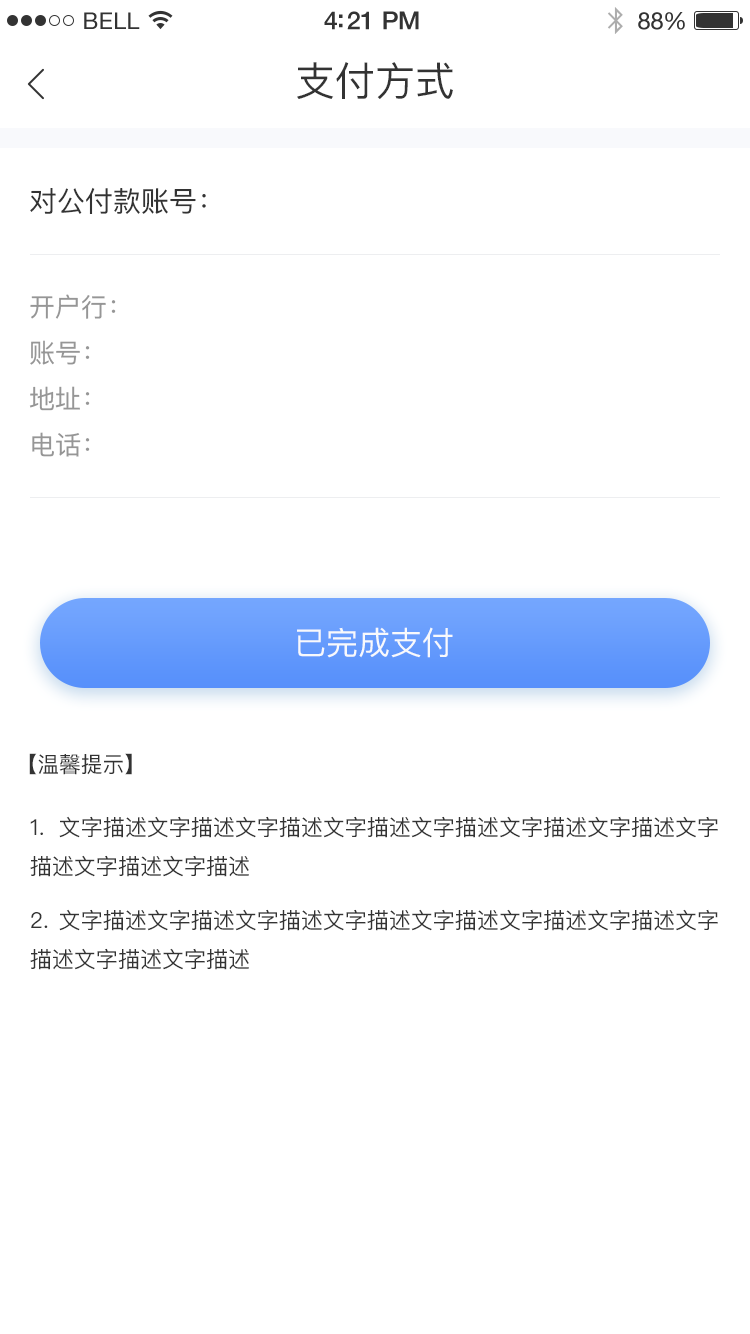
<style>
.page{position:relative;width:750px;height:1334px;background:#ffffff}
.page>*{position:absolute;margin:0}
.t1{font:23px "HelveticaNeue";letter-spacing:0.02em;color:#333333}
.t2{font:25px "HelveticaNeue-Medium";letter-spacing:-0.02em;color:#333333}
.t3{font:24px "HelveticaNeue";letter-spacing:-0.02em;color:#333333}
.t4{font:40px "PingFangSC-Regular";color:#333333}
.t5{font:27.9px "PingFangSC-Regular";color:#333333}
.t6{font:26px/36px "PingFangSC-Regular";color:#969696}
.t7{font:32px "PingFangSC-Regular";color:#f8f9fc}
.t8{font:22px "PingFangSC-Regular";color:#333333;text-transform:uppercase}
.t9{font:22px/39px "PingFangSC-Regular";color:#333333;text-transform:uppercase}
</style>
<div class="page">
<p class="t1" style="left:84px;top:12px;width:56px;height:17px">BELL</p>
<p class="t2" style="left:324px;top:11px;width:95px;height:19px">4:21 PM</p>
<p class="t3" style="left:638px;top:12px;width:47px;height:18px">88%</p>
<p class="t4" style="left:297px;top:62px;width:156px;height:37px">支付方式</p>
<p class="t5" style="left:30px;top:187px;width:176px;height:27px">对公付款账号：</p>
<p class="t6" style="left:29px;top:294px;width:87px;height:163px">开户行：<br>账号：<br>地址：<br>电话：</p>
<p class="t7" style="left:297px;top:627px;width:156px;height:31px">已完成支付</p>
<p class="t8" style="left:29px;top:753px;width:103px;height:22px">【温馨提示】</p>
<p class="t9" style="left:30px;top:816px;width:688px;height:154px;text-align:justify">1. 文字描述文字描述文字描述文字描述文字描述文字描述文字描述文字描述文字描述文字描述<br>2. 文字描述文字描述文字描述文字描述文字描述文字描述文字描述文字描述文字描述文字描述</p>
</div>
